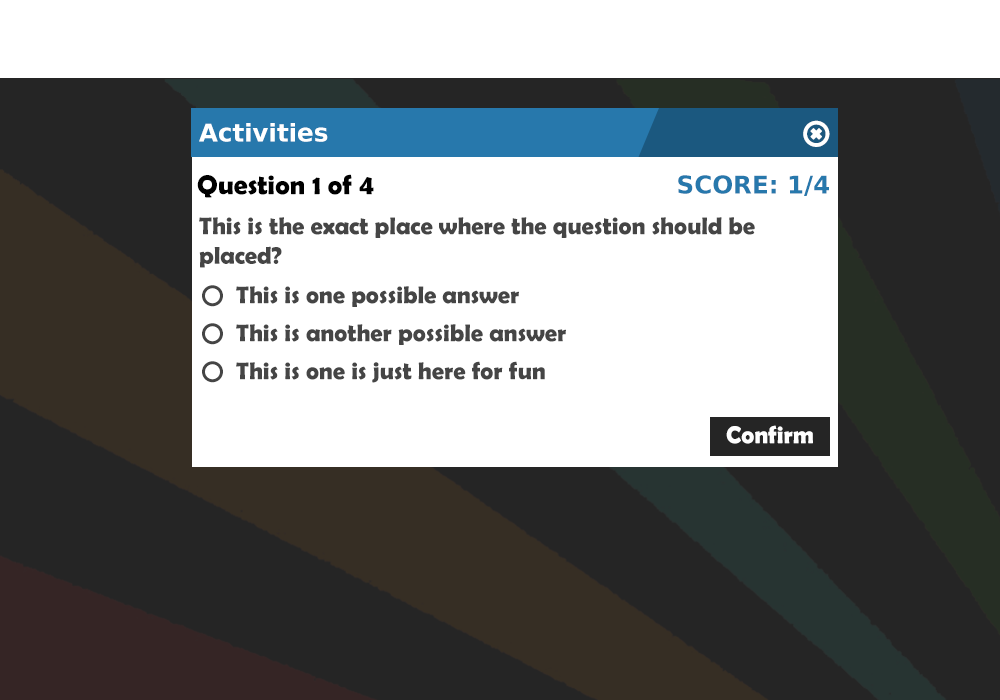
<style>
.page{position:relative;width:1000px;height:700px;background:#ffffff}
.page>*{position:absolute;margin:0}
.t1{font:24.5px "DejaVuSans-Bold";color:#ffffff}
.t2{font:27.5px "BerlinSansFBDemi-Bold";color:#000000}
.t3{font:24.5px "DejaVuSans-Bold";color:#2778ac}
.t4{font:24.5px "BerlinSansFBDemi-Bold";color:#454545}
.t5{font:24.5px "BerlinSansFBDemi-Bold";color:#fefefe}
</style>
<div class="page">
<p class="t1" style="left:199px;top:123px;width:129px;height:19px">Activities</p>
<p class="t2" style="left:197px;top:174px;width:177px;height:24px">Question 1 of 4</p>
<p class="t3" style="left:678px;top:175px;width:151px;height:21px">SCORE: 1/4</p>
<p class="t4" style="left:199px;top:217px;width:556px;height:51px">This is the exact place where the question should be placed?</p>
<p class="t4" style="left:236px;top:286px;width:283px;height:21px">This is one possible answer</p>
<p class="t4" style="left:236px;top:324px;width:330px;height:21px">This is another possible answer</p>
<p class="t4" style="left:236px;top:361px;width:309px;height:22px">This is one is just here for fun</p>
<p class="t5" style="left:726px;top:425px;width:87px;height:19px">Confirm</p>
</div>
